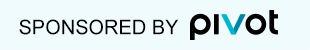
<style>
.page{position:relative;width:310px;height:50px;background:#f0fbfe}
.page>*{position:absolute;margin:0}
.t1{font:20px "ArialMT";color:#000000}
</style>
<div class="page">
<p class="t1" style="left:19px;top:19px;width:160px;height:16px">SPONSORED BY</p>
</div>
